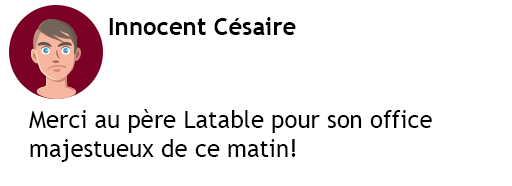
<style>
.page{position:relative;width:512px;height:186px;background:#ffffff}
.page>*{position:absolute;margin:0}
.t1{font:24px "TrebuchetMS-Bold";color:#000000}
.t2{font:24px "TrebuchetMS";color:#000000}
</style>
<div class="page">
<p class="t1" style="left:109px;top:17px;width:187px;height:18px">Innocent Césaire</p>
<p class="t2" style="left:29px;top:109px;width:403px;height:53px">Merci au père Latable pour son office <br>majestueux de ce matin!</p>
</div>
